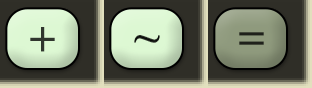
<style>
.page{position:relative;width:312px;height:88px;background:#2f2e27}
.page>*{position:absolute;margin:0}
.t1{font:48px "OpusChords";color:#30362e}
.t2{font:48px "OpusChords";color:#141613}
.t3{font:48px "OpusChords";color:#171916}
.t4{font:48px "OpusChords";color:#1f211b}
</style>
<div class="page">
<p class="t1" style="left:30px;top:27px;width:25px;height:25px">+</p>
<p class="t2" style="left:134px;top:35px;width:26px;height:7px">~</p>
<p class="t3" style="left:134px;top:36px;width:26px;height:7px">~</p>
<p class="t4" style="left:239px;top:32px;width:25px;height:13px">=</p>
</div>
